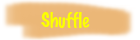
<style>
.page{position:relative;width:140px;height:40px}
.page>*{position:absolute;margin:0}
.t1{font:18px "MarkerFelt-Thin";color:#fcff00}
</style>
<div class="page">
<p class="t1" style="left:41px;top:12px;width:49px;height:16px">Shuffle</p>
</div>
